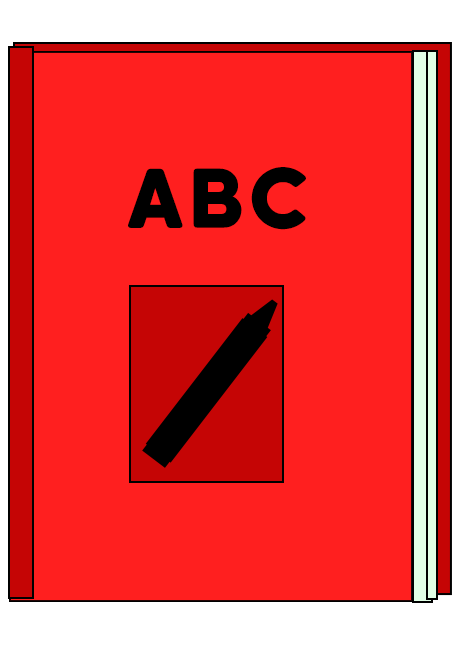
<style>
.page{position:relative;width:465px;height:649px;background:#ff1f1f}
.page>*{position:absolute;margin:0}
.t1{font:80px "KatahdinRound-Regular";color:#000000}
</style>
<div class="page">
<p class="t1" style="left:128px;top:167px;width:178px;height:63px">Abc</p>
</div>
